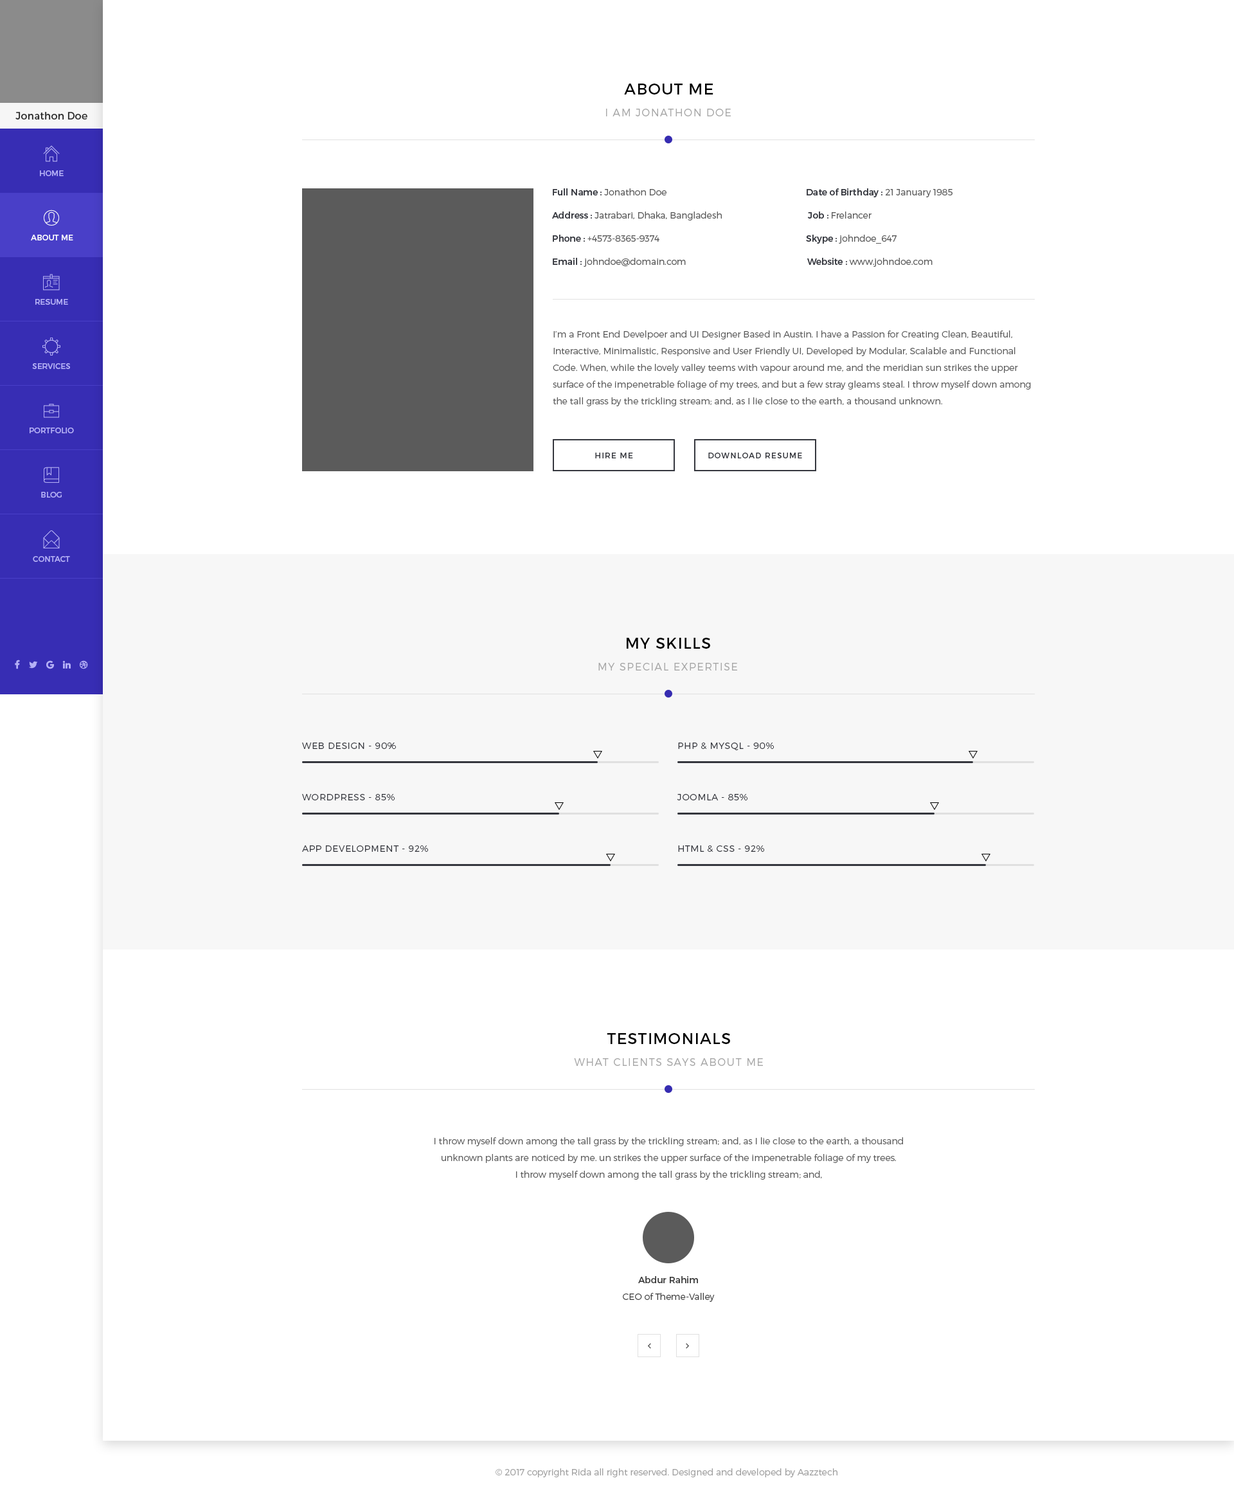
<style>
.page{position:relative;width:1234px;height:1505px;background:#ffffff}
.page>*{position:absolute;margin:0}
.t1{font:15.4px "Montserrat-Regular";letter-spacing:0.05em;color:#000000}
.t2{font:10.3px "Montserrat-Regular";color:#2a2a2a}
.t3{font:10.3px "Montserrat-Light";letter-spacing:0.1em;color:#a8a8a8}
.t4{font:7.7px "Montserrat-Regular";color:#b5b0f7;text-transform:uppercase}
.t5{font:9px/23.1px "Montserrat-Light";color:#5a5a5a}
.t6{font:9px/23.1px "Montserrat-Regular";color:#35373e}
.t7{font:7.7px "Montserrat-Regular";color:#ffffff;text-transform:uppercase}
.t8{font:9px/16.7px "Montserrat-Light";color:#5a5a5a}
.t9{font:7.7px "Montserrat-Regular";letter-spacing:0.1em;color:#35373e;text-transform:uppercase}
.t10{font:15.4px "Montserrat-Regular";letter-spacing:0.05em;color:#000000;text-transform:uppercase}
.t11{font:10.3px "Montserrat-Light";letter-spacing:0.1em;color:#a8a8a8;text-transform:uppercase}
.t12{font:9px "Montserrat-Light";letter-spacing:0.05em;color:#35373e;text-transform:uppercase}
.t13{font:9px/16.7px "Montserrat-Light";color:#3e3e3e}
.t14{font:9px/16.7px "Montserrat-Regular";color:#3e3e3e}
.t15{font:9px "Montserrat-Light";color:#9f9f9f}
</style>
<div class="page">
<p class="t1" style="left:624px;top:84px;width:90px;height:10px">ABOUT ME</p>
<p class="t2" style="left:15px;top:112px;width:72px;height:8px">Jonathon Doe</p>
<p class="t3" style="left:606px;top:109px;width:125px;height:7px">I AM JONATHON DOE</p>
<p class="t4" style="left:40px;top:170px;width:24px;height:6px">HOME</p>
<p class="t5" style="left:552px;top:188px;width:401px;height:79px"><span class="t6">Full Name : </span>Jonathon Doe <span class="t6">                                                           Date of Birthday : </span>21 January 1985<span class="t6">                <br>Address : </span>Jatrabari, Dhaka, Bangladesh<span class="t6">                                     Job : </span>Frelancer <br><span class="t6">Phone : </span>+4573-8365-9374<span class="t6">                                                               Skype : </span>johndoe_647<span class="t6">                                        <br>Email : </span>johndoe@domain.com                                        <span class="t6">          Website : </span>www.johndoe.com</p>
<p class="t7" style="left:31px;top:235px;width:42px;height:5px">about me</p>
<p class="t4" style="left:35px;top:299px;width:33px;height:6px">resume</p>
<p class="t8" style="left:553px;top:330px;width:478px;height:76px">I’m a Front End Develpoer and UI Designer Based in Austin. I have a Passion for Creating Clean, Beautiful, Interactive, Minimalistic, Responsive and User Friendly UI, Developed by Modular, Scalable and Functional Code. When, while the lovely valley teems with vapour around me, and the meridian sun strikes the upper surface of the impenetrable foliage of my trees, and but a few stray gleams steal. I throw myself down among the tall grass by the trickling stream; and, as I lie close to the earth, a thousand unknown.</p>
<p class="t4" style="left:32px;top:363px;width:38px;height:6px">services</p>
<p class="t4" style="left:30px;top:428px;width:44px;height:5px">portfolio</p>
<p class="t9" style="left:595px;top:453px;width:38px;height:5px">hire me</p>
<p class="t9" style="left:708px;top:453px;width:94px;height:5px">download resume</p>
<p class="t4" style="left:41px;top:492px;width:21px;height:6px">blog</p>
<p class="t4" style="left:33px;top:556px;width:37px;height:6px">contact</p>
<p class="t10" style="left:627px;top:638px;width:83px;height:11px">my skills</p>
<p class="t11" style="left:598px;top:663px;width:139px;height:7px">my special expertise</p>
<p class="t12" style="left:302px;top:742px;width:94px;height:7px">Web Design - 90%</p>
<p class="t12" style="left:678px;top:742px;width:96px;height:8px">php &amp; mysql - 90%</p>
<p class="t12" style="left:302px;top:794px;width:93px;height:6px">Wordpress - 85%</p>
<p class="t12" style="left:677px;top:794px;width:71px;height:6px">JOOMLA - 85%</p>
<p class="t12" style="left:302px;top:845px;width:126px;height:7px">app development - 92%</p>
<p class="t12" style="left:678px;top:845px;width:86px;height:7px">html &amp; css - 92%</p>
<p class="t10" style="left:607px;top:1033px;width:123px;height:11px">TESTIMONIALS</p>
<p class="t11" style="left:574px;top:1058px;width:189px;height:8px">what clients says about me</p>
<p class="t8" style="left:435px;top:1137px;width:468px;height:43px;text-align:center">I throw myself down among the tall grass by the trickling stream; and, as I lie close to the earth, a thousand unknown plants are noticed by me. un strikes the upper surface of the impenetrable foliage of my trees.<br>I throw myself down among the tall grass by the trickling stream; and,</p>
<p class="t13" style="left:623px;top:1276px;width:92px;height:26px;text-align:center"><span class="t14">Abdur Rahim<br></span>CEO of Theme-Valley</p>
<p class="t15" style="left:496px;top:1468px;width:342px;height:9px">© 2017 copyright Rida all right reserved. Designed and developed by Aazztech</p>
</div>
